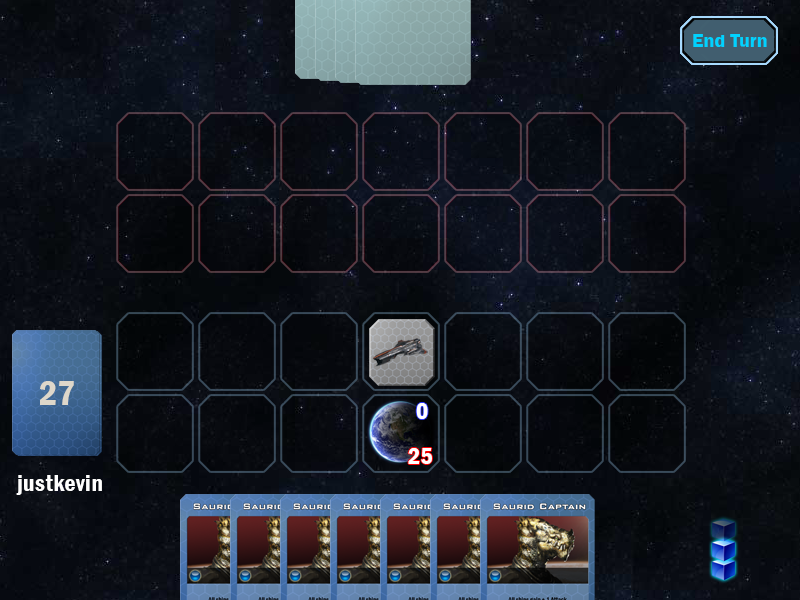
<style>
.page{position:relative;width:800px;height:600px}
.page>*{position:absolute;margin:0}
.t1{font:20px "FranklinGothic-Demi";color:#00d2ff}
.t2{font:36px "FranklinGothic-DemiCond";color:#ded7ca}
.t3{font:24px "FranklinGothic-DemiCond";color:#ffffff}
.t4{font:24px "FranklinGothic-DemiCond";letter-spacing:0.02em;color:#ffffff}
</style>
<div class="page">
<p class="t1" style="left:693px;top:34px;width:74px;height:13px">End Turn</p>
<p class="t2" style="left:40px;top:381px;width:34px;height:24px">27</p>
<p class="t3" style="left:416px;top:403px;width:12px;height:16px">0</p>
<p class="t3" style="left:408px;top:448px;width:24px;height:16px">25</p>
<p class="t4" style="left:16px;top:475px;width:86px;height:20px">justkevin</p>
</div>
